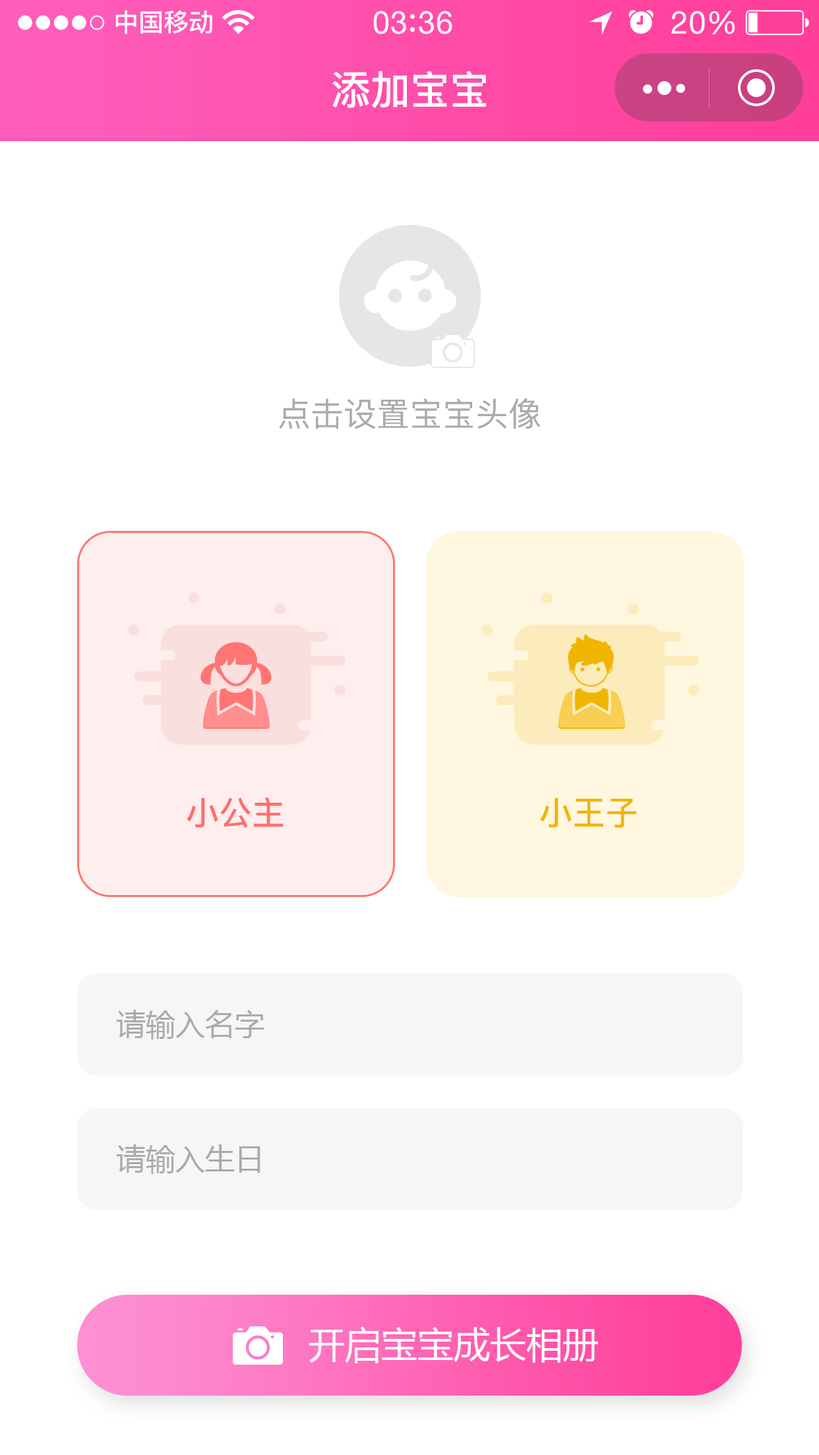
<style>
.page{position:relative;width:819px;height:1455px;background:#ffffff}
.page>*{position:absolute;margin:0}
.t1{font:39.6px "PingFang-SC-Bold";color:#ffffff}
.t2{font:33px "PingFang-SC-Medium";color:#aaaaaa}
.t3{font:33px "PingFang-SC-Bold";color:#ff6e6e}
.t4{font:33px "PingFang-SC-Bold";color:#f0b500}
.t5{font:29.7px "MicrosoftYaHei";color:#aaaaaa}
.t6{font:36.3px "MicrosoftYaHei";color:#ffffff}
</style>
<div class="page">
<p class="t1" style="left:332px;top:71px;width:155px;height:37px">添加宝宝</p>
<p class="t2" style="left:279px;top:398px;width:262px;height:31px">点击设置宝宝头像</p>
<p class="t3" style="left:187px;top:797px;width:97px;height:32px">小公主</p>
<p class="t4" style="left:540px;top:798px;width:97px;height:30px">小王子</p>
<p class="t5" style="left:116px;top:1010px;width:149px;height:30px">请输入名字</p>
<p class="t5" style="left:116px;top:1145px;width:145px;height:29px">请输入生日</p>
<p class="t6" style="left:309px;top:1327px;width:289px;height:37px">开启宝宝成长相册</p>
</div>
